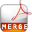
<style>
.page{position:relative;width:32px;height:32px;background:#ffffff}
.page>*{position:absolute;margin:0}
.t1{font:9px "OratorStd";color:#ffffff}
</style>
<div class="page">
<p class="t1" style="left:2px;top:24px;width:26px;height:6px">merge</p>
</div>
